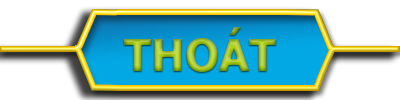
<style>
.page{position:relative;width:400px;height:100px;background:#ffffff}
.page>*{position:absolute;margin:0}
.t1{font:44px "Tahoma-Bold"}
</style>
<div class="page">
<p class="t1" style="left:124px;top:27px;width:152px;height:45px">THOÁT</p>
</div>
